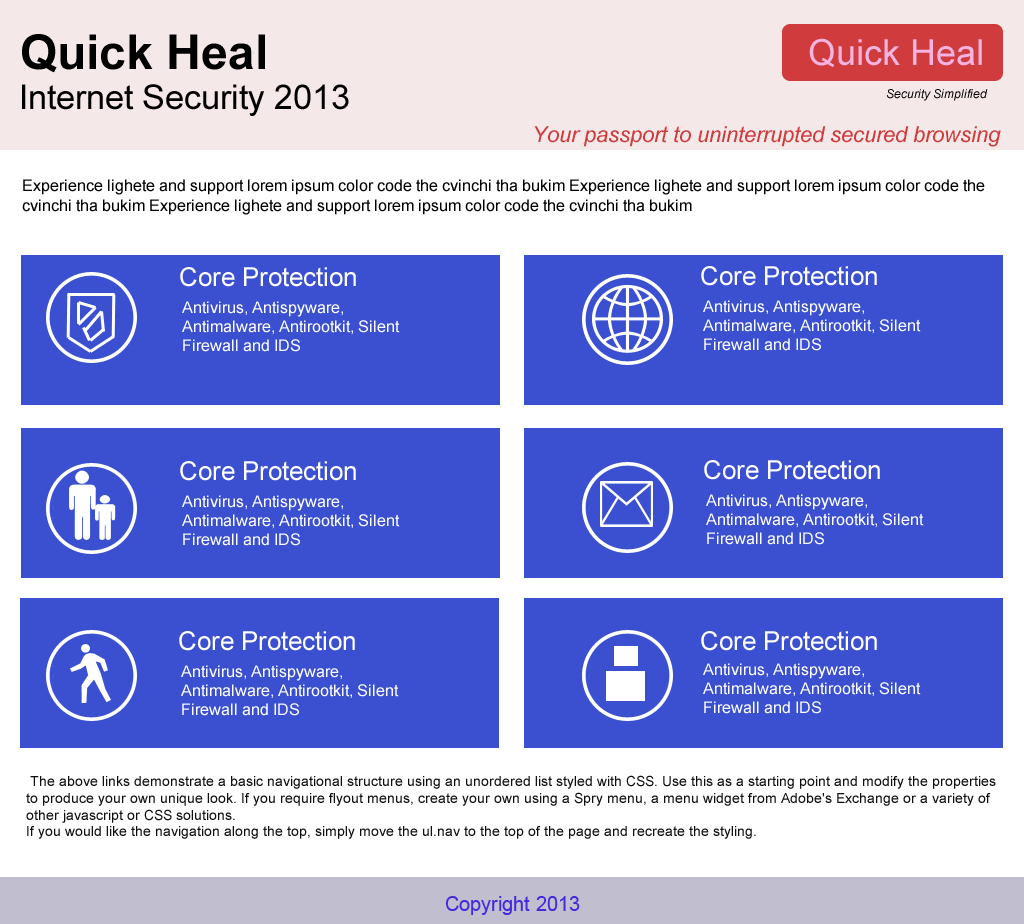
<style>
.page{position:relative;width:1024px;height:924px;background:#3b50d0}
.page>*{position:absolute;margin:0}
.t1{font:48px "Arial-BoldMT";color:#000000}
.t2{font:36px "ArialMT";color:#f5b3e0}
.t3{font:34px "ArialMT";color:#000000}
.t4{font:12px "Arial-ItalicMT";color:#000000}
.t5{font:22px "Arial-ItalicMT";color:#d03b3e}
.t6{font:16px "ArialMT";color:#000000}
.t7{font:26px "ArialMT";color:#ffffff}
.t8{font:16px "ArialMT";color:#ffffff}
.t9{font:14px "ArialMT";color:#0f0f11}
.t10{font:20px "ArialMT";color:#432adc}
</style>
<div class="page">
<p class="t1" style="left:22px;top:34px;width:243px;height:39px">Quick Heal</p>
<p class="t2" style="left:809px;top:38px;width:173px;height:29px">Quick Heal</p>
<p class="t3" style="left:22px;top:84px;width:327px;height:32px">Internet Security 2013</p>
<p class="t4" style="left:887px;top:89px;width:101px;height:12px">Security Simplified</p>
<p class="t5" style="left:534px;top:126px;width:467px;height:21px">Your passport to uninterrupted secured browsing</p>
<p class="t6" style="left:22px;top:179px;width:963px;height:36px">Experience lighete and support lorem ipsum color code the cvinchi tha bukim Experience lighete and support lorem ipsum color code the cvinchi tha bukim Experience lighete and support lorem ipsum color code the cvinchi tha bukim</p>
<p class="t7" style="left:180px;top:267px;width:176px;height:20px">Core Protection</p>
<p class="t7" style="left:701px;top:266px;width:176px;height:20px">Core Protection</p>
<p class="t8" style="left:182px;top:301px;width:218px;height:51px">Antivirus, Antispyware,<br>Antimalware, Antirootkit, Silent<br>Firewall and IDS</p>
<p class="t8" style="left:703px;top:300px;width:218px;height:51px">Antivirus, Antispyware,<br>Antimalware, Antirootkit, Silent<br>Firewall and IDS</p>
<p class="t7" style="left:180px;top:461px;width:176px;height:20px">Core Protection</p>
<p class="t7" style="left:704px;top:460px;width:176px;height:20px">Core Protection</p>
<p class="t8" style="left:182px;top:495px;width:218px;height:51px">Antivirus, Antispyware,<br>Antimalware, Antirootkit, Silent<br>Firewall and IDS</p>
<p class="t8" style="left:706px;top:494px;width:218px;height:51px">Antivirus, Antispyware,<br>Antimalware, Antirootkit, Silent<br>Firewall and IDS</p>
<p class="t7" style="left:179px;top:631px;width:176px;height:20px">Core Protection</p>
<p class="t7" style="left:701px;top:631px;width:176px;height:20px">Core Protection</p>
<p class="t8" style="left:181px;top:665px;width:218px;height:51px">Antivirus, Antispyware,<br>Antimalware, Antirootkit, Silent<br>Firewall and IDS</p>
<p class="t8" style="left:703px;top:663px;width:218px;height:51px">Antivirus, Antispyware,<br>Antimalware, Antirootkit, Silent<br>Firewall and IDS</p>
<p class="t9" style="left:26px;top:775px;width:970px;height:64px">The above links demonstrate a basic navigational structure using an unordered list styled with CSS. Use this as a starting point and modify the properties to produce your own unique look. If you require flyout menus, create your own using a Spry menu, a menu widget from Adobe's Exchange or a variety of other javascript or CSS solutions.<br>If you would like the navigation along the top, simply move the ul.nav to the top of the page and recreate the styling.</p>
<p class="t10" style="left:445px;top:896px;width:135px;height:19px">Copyright 2013</p>
</div>
